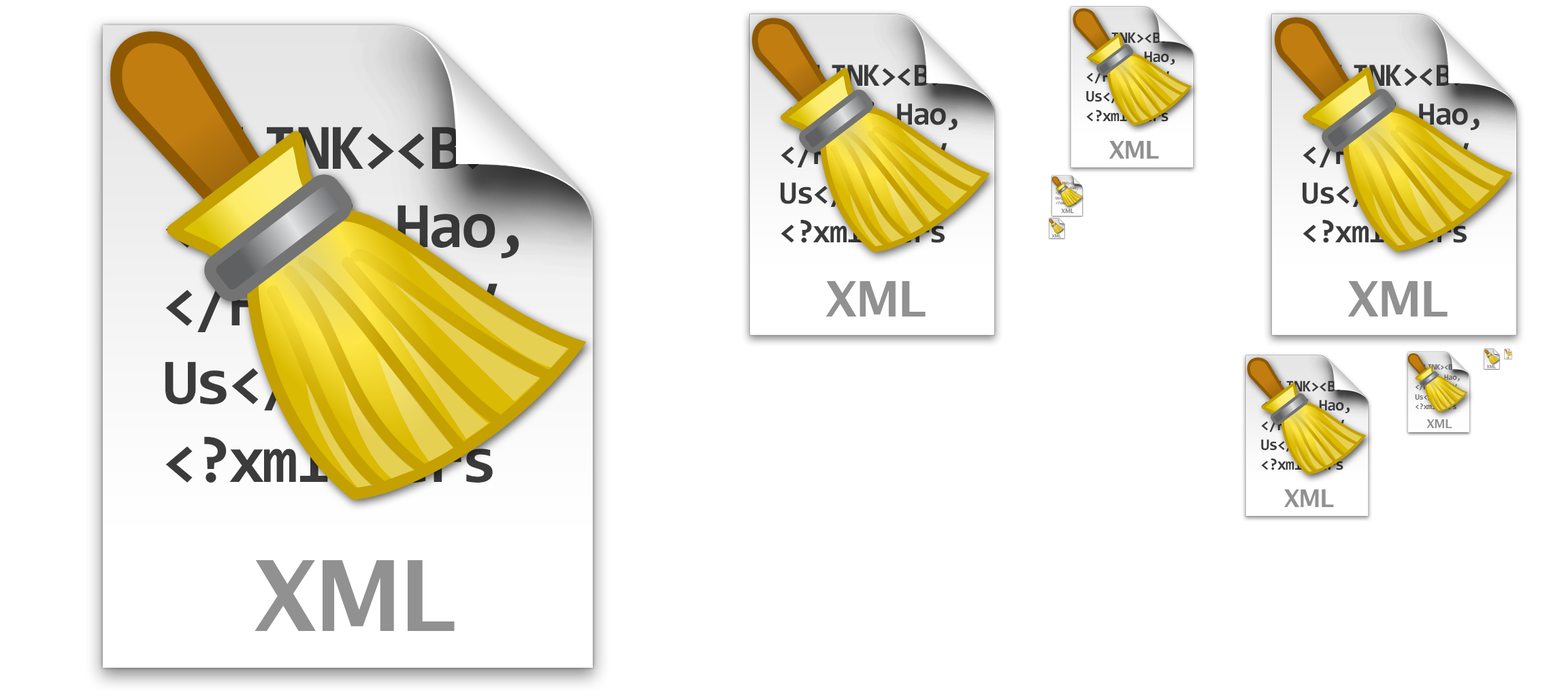
<style>
.page{position:relative;width:1568px;height:697px;background:#ffffff}
.page>*{position:absolute;margin:0}
.t1{font:16.3px "Consolas-Bold";letter-spacing:-0.04em}
.t2{font:32.7px "Consolas-Bold";letter-spacing:-0.04em}
.t3{font:65.3px "Consolas-Bold";letter-spacing:-0.04em}
.t4{font:24.5px "LucidaGrande-Bold";letter-spacing:-0.04em;color:#919191}
.t5{font:6.1px "LucidaGrande-Bold";letter-spacing:-0.04em;color:#909090}
.t6{font:4.4px "LucidaGrande-Bold";letter-spacing:-0.04em;color:#8f8f8f}
.t7{font:49px "LucidaGrande-Bold";letter-spacing:-0.04em;color:#919191}
.t8{font:1.4px "LucidaGrande-Bold";letter-spacing:-0.04em;color:#909090}
.t9{font:12.2px "LucidaGrande-Bold";letter-spacing:-0.04em;color:#909090}
.t10{font:98px "LucidaGrande-Bold";letter-spacing:-0.04em;color:#919191}
</style>
<div class="page">
<p class="t1" style="left:1086px;top:32px;width:89px;height:90px">&lt;BLINK&gt;&lt;B&gt;<br>&lt;H1&gt;Ni Hao,<br>&lt;/H2&gt;&lt;/DIV<br>Us&lt;/BLINK&gt;<br>&lt;?xml vers</p>
<p class="t2" style="left:781px;top:65px;width:177px;height:178px">&lt;BLINK&gt;&lt;B&gt;<br>&lt;H1&gt;Ni Hao,<br>&lt;/H2&gt;&lt;/DIV<br>Us&lt;/BLINK&gt;<br>&lt;?xml vers</p>
<p class="t2" style="left:1303px;top:65px;width:177px;height:178px">&lt;BLINK&gt;&lt;B&gt;<br>&lt;H1&gt;Ni Hao,<br>&lt;/H2&gt;&lt;/DIV<br>Us&lt;/BLINK&gt;<br>&lt;?xml vers</p>
<p class="t3" style="left:165px;top:127px;width:354px;height:356px">&lt;BLINK&gt;&lt;B&gt;<br>&lt;H1&gt;Ni Hao,<br>&lt;/H2&gt;&lt;/DIV<br>Us&lt;/BLINK&gt;<br>&lt;?xml vers</p>
<p class="t4" style="left:1109px;top:141px;width:50px;height:18px">XML</p>
<p class="t5" style="left:1061px;top:208px;width:13px;height:6px">XML</p>
<p class="t6" style="left:1051px;top:234px;width:11px;height:4px">XML</p>
<p class="t7" style="left:826px;top:281px;width:100px;height:35px">XML</p>
<p class="t7" style="left:1348px;top:281px;width:100px;height:35px">XML</p>
<p class="t6" style="left:1486px;top:365px;width:11px;height:4px">XML</p>
<p class="t8" style="left:1506px;top:357px;width:3px;height:2px">Tidy</p>
<p class="t1" style="left:1261px;top:380px;width:89px;height:90px">&lt;BLINK&gt;&lt;B&gt;<br>&lt;H1&gt;Ni Hao,<br>&lt;/H2&gt;&lt;/DIV<br>Us&lt;/BLINK&gt;<br>&lt;?xml vers</p>
<p class="t9" style="left:1426px;top:419px;width:26px;height:9px">XML</p>
<p class="t4" style="left:1284px;top:489px;width:50px;height:18px">XML</p>
<p class="t10" style="left:255px;top:560px;width:200px;height:71px">XML</p>
</div>
